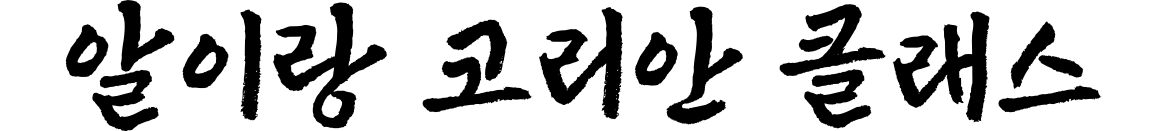
<style>
.page{position:relative;width:1168px;height:131px;background:#ffffff}
.page>*{position:absolute;margin:0}
.t1{font:130px "Shilla_CultureB-Bold";color:#000000}
</style>
<div class="page">
<p class="t1" style="left:65px;top:0px;width:1037px;height:132px">알이랑 코리안 클래스</p>
</div>
